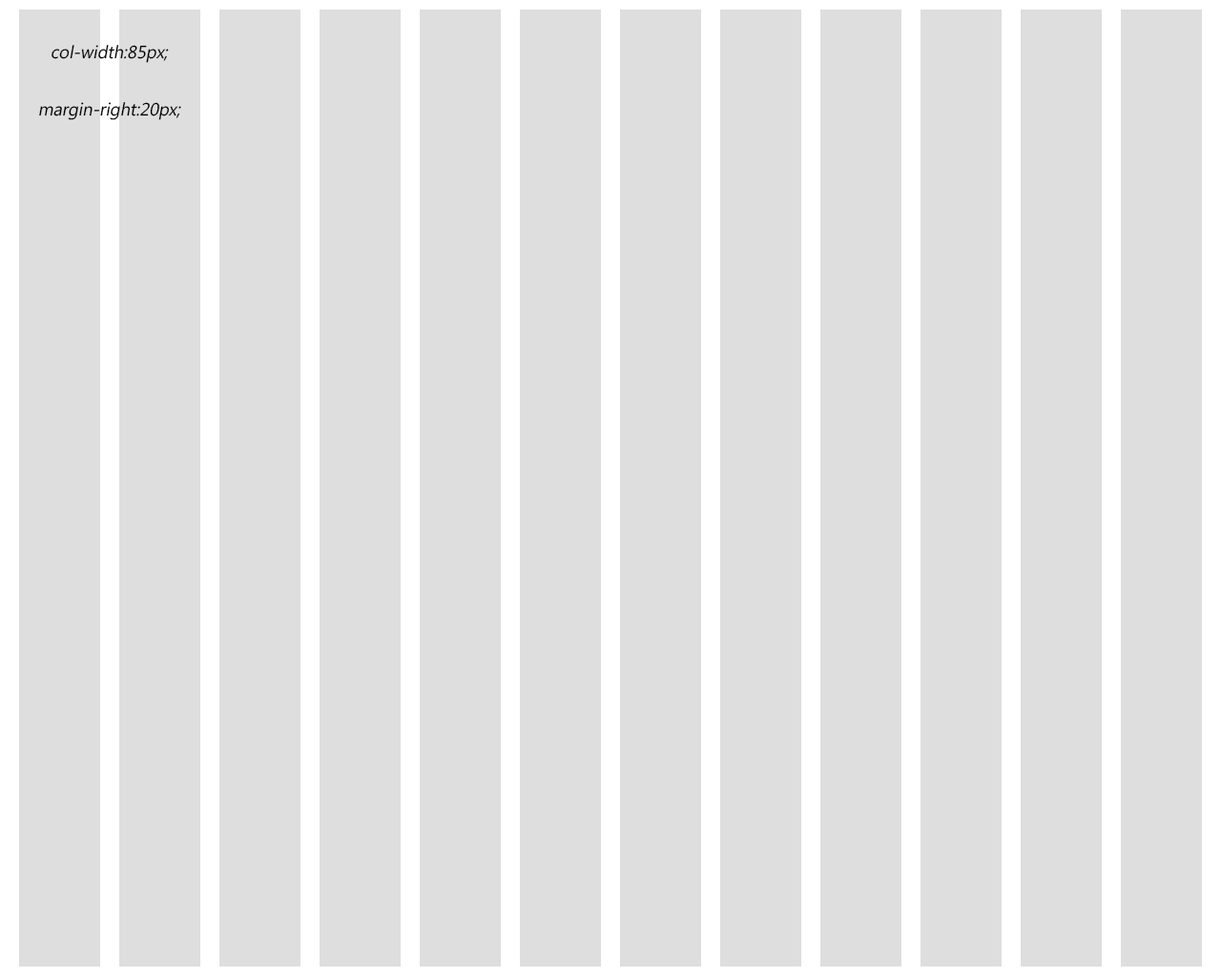
<style>
.page{position:relative;width:1221px;height:977px;background:#dedede}
.page>*{position:absolute;margin:0}
.t1{font:17.2px/57.2px "MalgunGothicRegular";color:#000000;font-style:italic}
</style>
<div class="page">
<p class="t1" style="left:39px;top:45px;width:142px;height:75px;text-align:center">col-width:85px;<br>margin-right:20px;</p>
</div>
